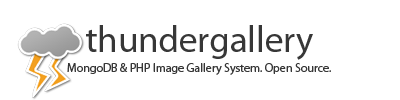
<style>
.page{position:relative;width:400px;height:100px;background:#ffffff}
.page>*{position:absolute;margin:0}
.t1{font:37px "MyriadPro-Regular";letter-spacing:-0.003em;color:#373737}
.t2{font:12px "MyriadPro-Regular";letter-spacing:-0.003em;color:#373737}
</style>
<div class="page">
<p class="t1" style="left:86px;top:25px;width:227px;height:35px">thundergallery</p>
<p class="t2" style="left:67px;top:63px;width:264px;height:12px">MongoDB &amp; PHP Image Gallery System. Open Source.</p>
</div>
